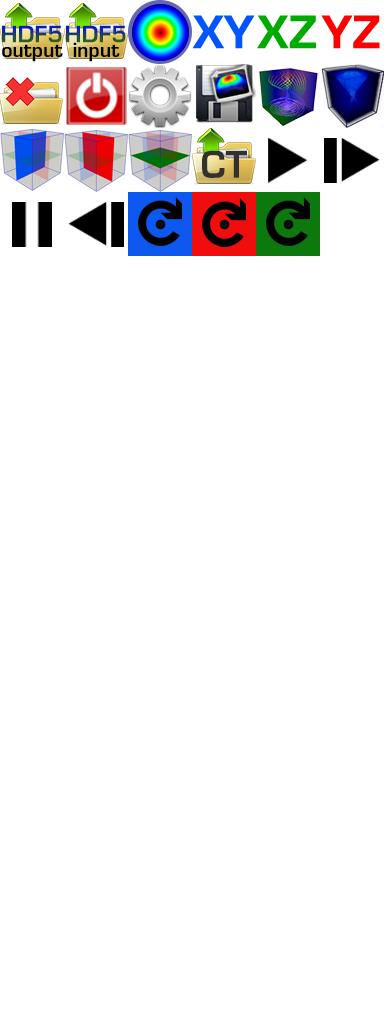
<style>
.page{position:relative;width:384px;height:1024px;background:#ffffff}
.page>*{position:absolute;margin:0}
.t1{font:43px "Euromode-Bold";color:#0055ff;font-weight:bold}
.t2{font:43px "Euromode-Bold";color:#00aa00;font-weight:bold}
.t3{font:43px "Euromode-Bold";color:#ff0000;font-weight:bold}
.t4{font:22px "Euromode-Bold"}
.t5{font:19px "Euromode-Bold";color:#000000}
.t6{font:36px "Euromode-Bold";color:#333030}
</style>
<div class="page">
<p class="t1" style="left:192px;top:15px;width:63px;height:34px">XY</p>
<p class="t2" style="left:257px;top:15px;width:59px;height:34px">XZ</p>
<p class="t3" style="left:321px;top:15px;width:59px;height:34px">YZ</p>
<p class="t4" style="left:2px;top:25px;width:60px;height:18px">HDF5</p>
<p class="t4" style="left:66px;top:25px;width:60px;height:18px">HDF5</p>
<p class="t5" style="left:2px;top:44px;width:61px;height:18px">output</p>
<p class="t5" style="left:73px;top:42px;width:47px;height:20px">input</p>
<p class="t6" style="left:202px;top:150px;width:45px;height:28px">CT</p>
</div>
